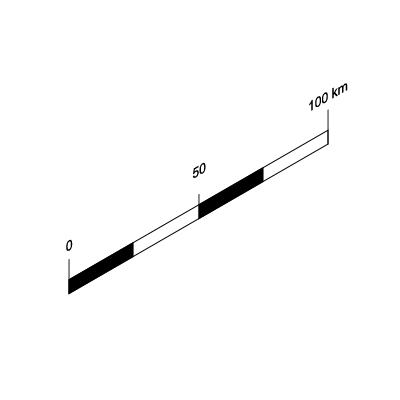
<style>
.page{position:relative;width:400px;height:400px;background:#ffffff}
.page>*{position:absolute;margin:0}
.t1{font:14px "ArialMT";color:#000000}
</style>
<div class="page">
<p class="t1" style="left:309px;top:83px;width:39px;height:28px;rotate:-30deg">100 km</p>
<p class="t1" style="left:192px;top:162px;width:14px;height:16px;rotate:-30deg">50</p>
<p class="t1" style="left:66px;top:239px;width:7px;height:12px;rotate:-30deg">0</p>
</div>
